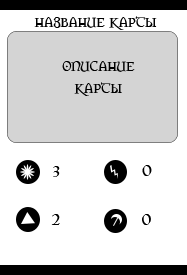
<style>
.page{position:relative;width:187px;height:275px;background:#ffffff}
.page>*{position:absolute;margin:0}
.t1{font:18px "Orpheus";color:#000000}
</style>
<div class="page">
<p class="t1" style="left:34px;top:16px;width:123px;height:14px">название карты</p>
<p class="t1" style="left:62px;top:61px;width:73px;height:35px;text-align:center">описание<br>карты</p>
<p class="t1" style="left:53px;top:166px;width:7px;height:11px">3</p>
<p class="t1" style="left:142px;top:165px;width:10px;height:11px">0</p>
<p class="t1" style="left:51px;top:214px;width:9px;height:11px">2</p>
<p class="t1" style="left:142px;top:214px;width:9px;height:11px">0</p>
</div>
